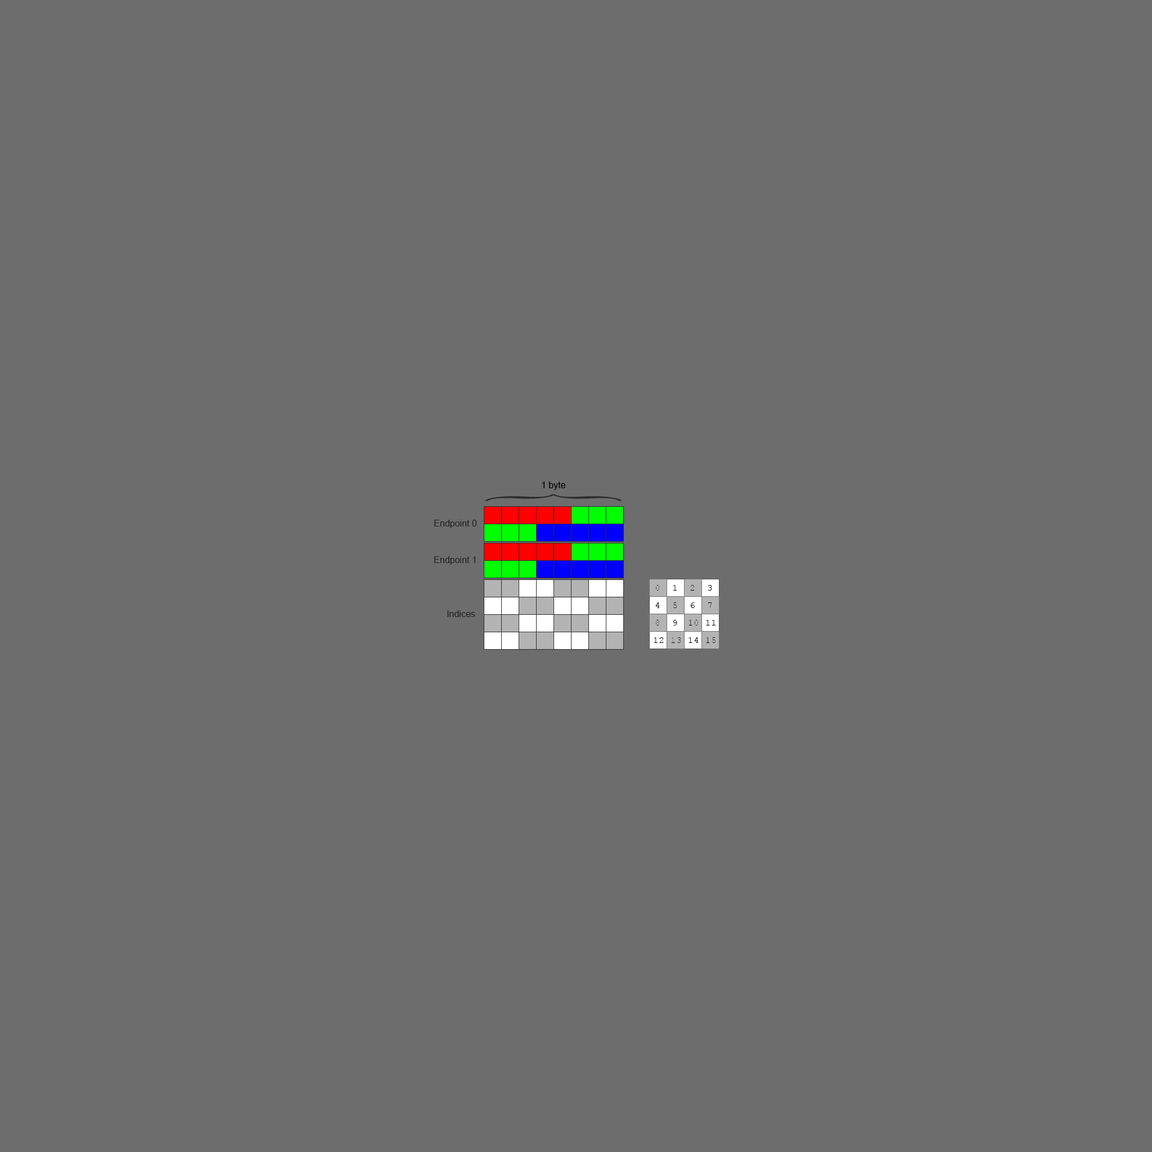
<style>
.page{position:relative;width:1152px;height:1152px;background:#6d6d6d}
.page>*{position:absolute;margin:0}
.t1{font:9px "ArialMT";color:#000000}
.t2{font:9px "ArialMT";color:#232323}
</style>
<div class="page">
<p class="t1" style="left:542px;top:482px;width:24px;height:8px">1 byte</p>
<p class="t2" style="left:434px;top:520px;width:43px;height:8px">Endpoint 0</p>
<p class="t2" style="left:434px;top:556px;width:42px;height:9px">Endpoint 1</p>
<p class="t2" style="left:447px;top:610px;width:28px;height:7px">Indices</p>
</div>
